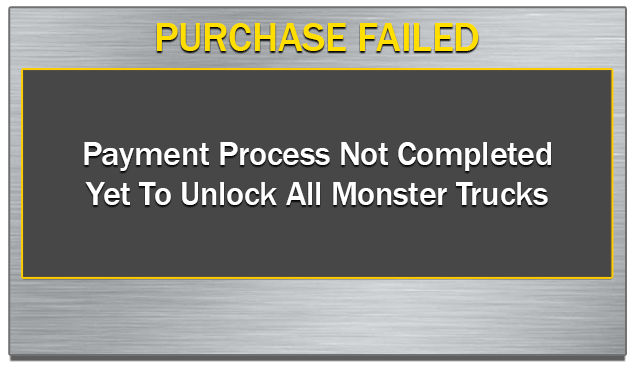
<style>
.page{position:relative;width:634px;height:370px;background:#474747}
.page>*{position:absolute;margin:0}
.t1{font:40.6px "FranklinGothic-Medium";color:#ffde00}
.t2{font:33.5px "FranklinGothic-Medium";color:#ffffff}
</style>
<div class="page">
<p class="t1" style="left:157px;top:23px;width:322px;height:28px">PURCHASE FAILED</p>
<p class="t2" style="left:84px;top:142px;width:467px;height:63px;text-align:center">Payment Process Not Completed<br>Yet To Unlock All Monster Trucks</p>
</div>
